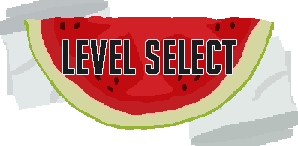
<style>
.page{position:relative;width:298px;height:146px;background:#ffffff}
.page>*{position:absolute;margin:0}
.t1{font:45.8px "BigNoodleTitling";color:#1a1d1f;font-weight:bold;scale:0.97 1}
</style>
<div class="page">
<p class="t1" style="left:63px;top:40px;width:173px;height:34px">Level Select</p>
</div>
